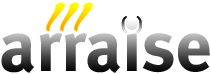
<style>
.page{position:relative;width:211px;height:74px;background:#ffffff}
.page>*{position:absolute;margin:0}
.t1{font:72px "MetaBoldLF-Roman"}
</style>
<div class="page">
<p class="t1" style="left:1px;top:18px;width:209px;height:55px">arraise</p>
</div>
